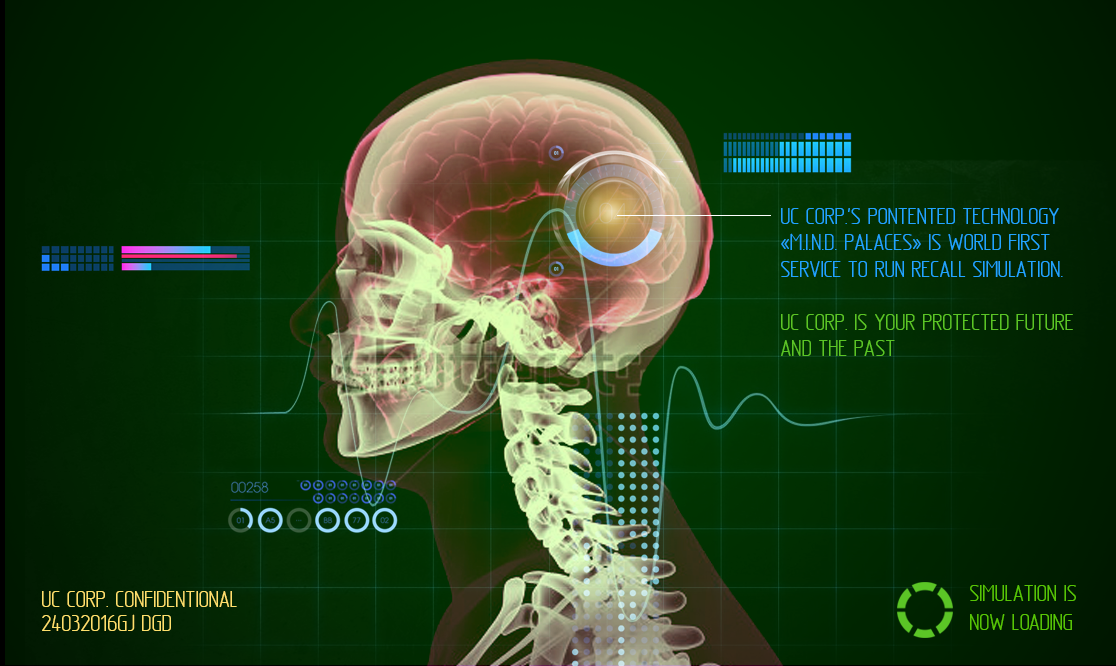
<style>
.page{position:relative;width:1116px;height:666px}
.page>*{position:absolute;margin:0}
.t1{font:24px/26.4px "GOSTTypeA";letter-spacing:-0.02em;color:#23a4ff;text-transform:uppercase}
.t2{font:24px/14.4px "GOSTTypeA";letter-spacing:-0.02em;color:#23a4ff;text-transform:uppercase}
.t3{font:24px/26.4px "GOSTTypeA";letter-spacing:-0.02em;color:#5bc526;text-transform:uppercase}
.t4{font:24px/14.4px "GOSTTypeA";letter-spacing:-0.02em;color:#ffe06d;text-transform:uppercase}
.t5{font:24px/24.4px "GOSTTypeA";letter-spacing:-0.02em;color:#ffe06d;text-transform:uppercase}
.t6{font:24px "GOSTTypeA";letter-spacing:-0.02em;color:#57c506;text-transform:uppercase}
</style>
<div class="page">
<p class="t1" style="left:781px;top:208px;width:292px;height:148px"><span class="t2">UC CORP.'s PONTENTED TECHNOLOGY<br></span>«m.i.n.d. palaces» is world first<br>service to run recall simulation.<br><span class="t3"><br>UC CORP. IS YOUR PROTECTED FUTURE<br>AND THE PAST</span></p>
<p class="t4" style="left:42px;top:591px;width:195px;height:40px">UC CORP. confidentional<br><span class="t5">24032016GJ DGD</span></p>
<p class="t6" style="left:970px;top:584px;width:106px;height:46px">simulation IS<br>now loading</p>
</div>
